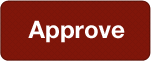
<style>
.page{position:relative;width:151px;height:61px;background:#80160a}
.page>*{position:absolute;margin:0}
.t1{font:24px "HelveticaNeue-Bold";color:#ffffff}
</style>
<div class="page">
<p class="t1" style="left:28px;top:20px;width:97px;height:23px">Approve</p>
</div>
